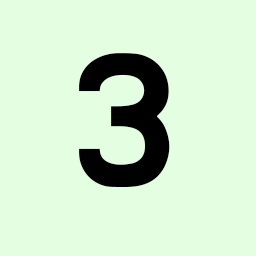
<style>
.page{position:relative;width:256px;height:256px;background:#e4fee2}
.page>*{position:absolute;margin:0}
.t1{font:153.3px "BMDoHyeon";color:#000000}
</style>
<div class="page">
<p class="t1" style="left:79px;top:53px;width:91px;height:134px">3</p>
</div>
